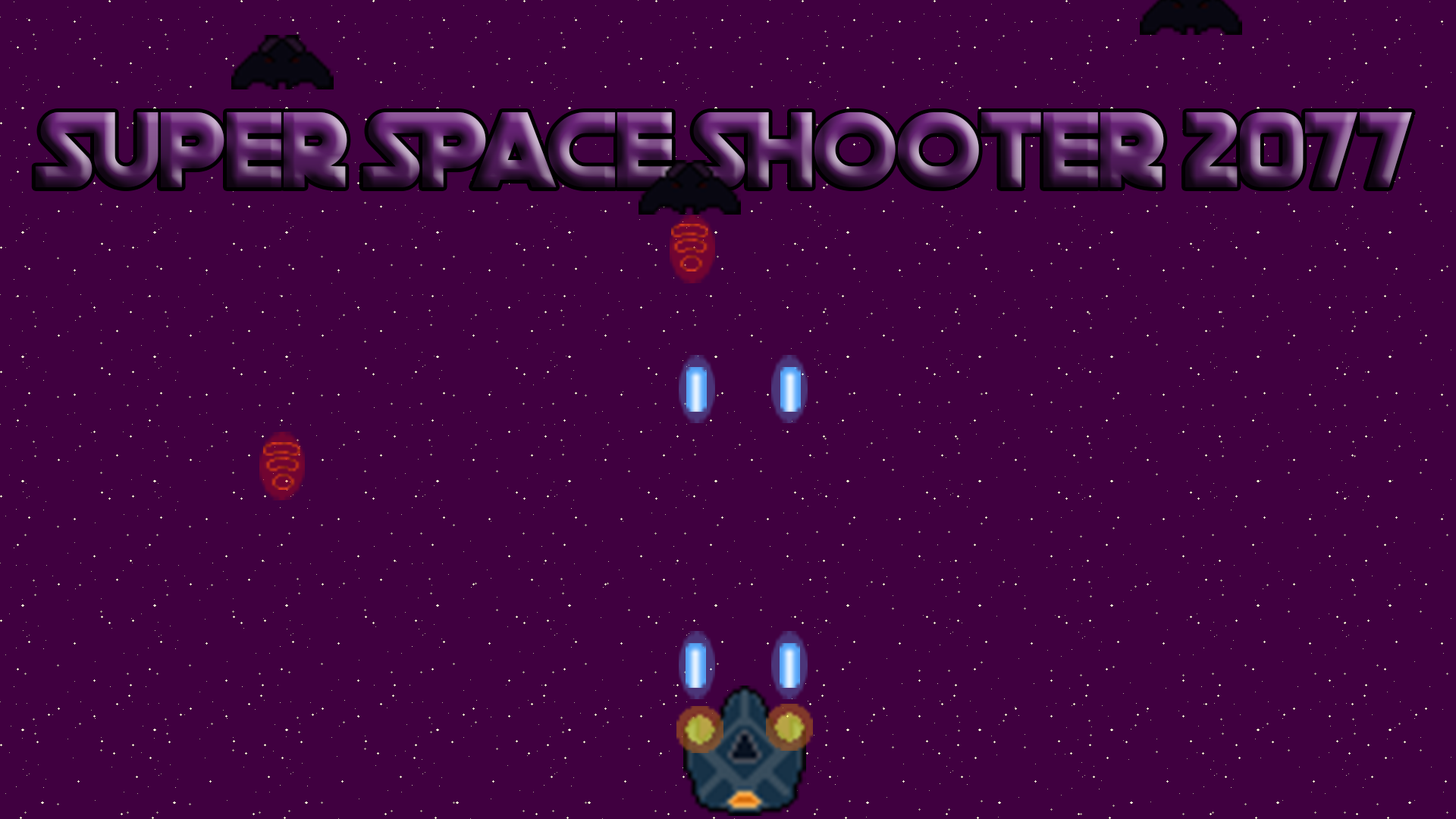
<style>
.page{position:relative;width:1456px;height:819px;background:#400040}
.page>*{position:absolute;margin:0}
.t1{font:106.2px "DeathStar"}
</style>
<div class="page">
<p class="t1" style="left:35px;top:112px;width:1377px;height:75px">Super Space Shooter 2077</p>
</div>
